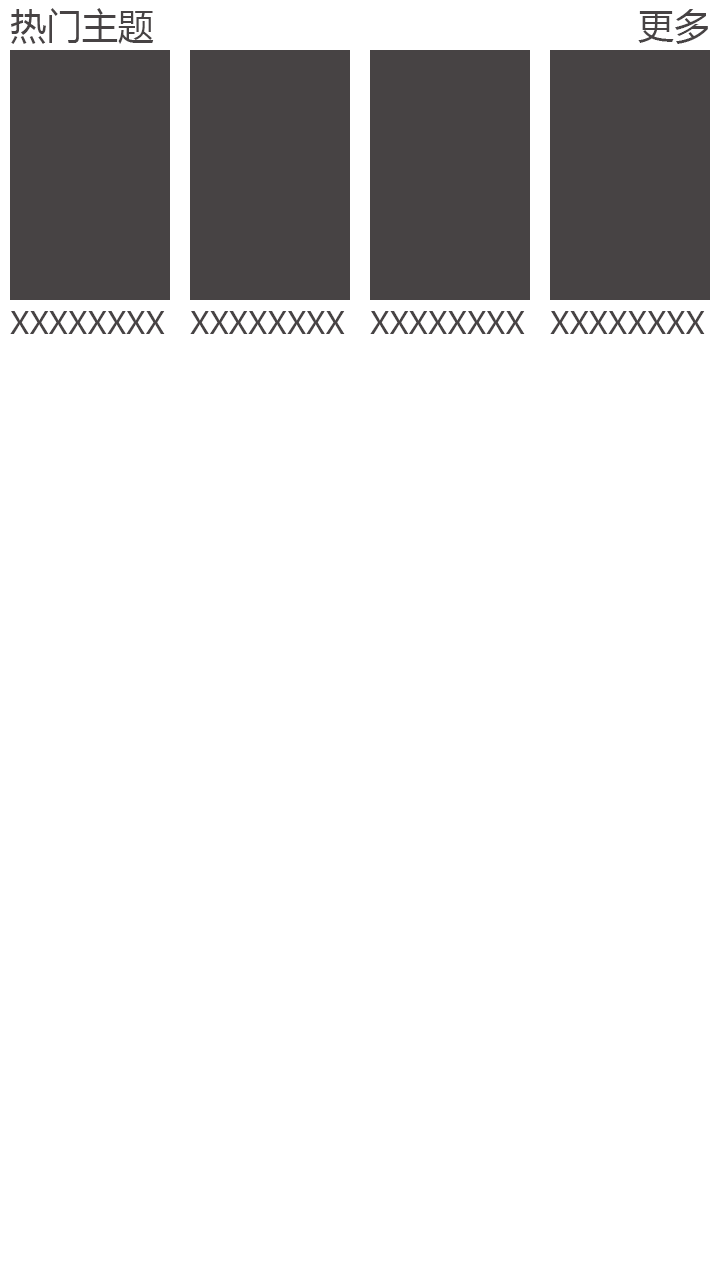
<style>
.page{position:relative;width:720px;height:1280px;background:#ffffff}
.page>*{position:absolute;margin:0}
.t1{font:36px "MicrosoftYaHei";color:#474344}
.t2{font:30px "MicrosoftYaHei";color:#474344}
</style>
<div class="page">
<p class="t1" style="left:11px;top:8px;width:143px;height:36px">热门主题</p>
<p class="t1" style="left:638px;top:9px;width:70px;height:35px">更多</p>
<p class="t2" style="left:10px;top:311px;width:155px;height:23px">XXXXXXXX</p>
<p class="t2" style="left:190px;top:311px;width:155px;height:23px">XXXXXXXX</p>
<p class="t2" style="left:370px;top:311px;width:155px;height:23px">XXXXXXXX</p>
<p class="t2" style="left:550px;top:311px;width:155px;height:23px">XXXXXXXX</p>
</div>
